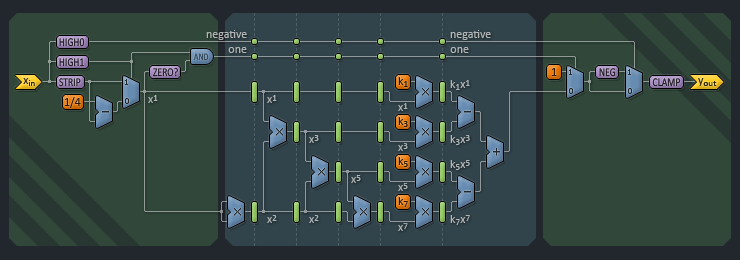
<style>
.page{position:relative;width:740px;height:260px;background:#30473a}
.page>*{position:absolute;margin:0}
.t1{font:12px "Calibri";color:#b2b6b7}
.t2{font:10px "Calibri";scale:0.8 1}
.t3{font:16px "Calibri";color:#332907}
.t4{font:12px "Calibri";color:#332907}
.t5{font:12px "Calibri";scale:0.8 1}
.t6{font:12px/20px "Calibri";color:#2f1903}
.t7{font:16px/20px "Calibri";color:#2f1903}
.t8{font:12px "Calibri";color:#2f1800}
.t9{font:12px "Calibri";color:#1e1823;scale:0.8 1}
.t10{font:12px "Calibri";color:#1c1722;scale:0.8 1}
.t11{font:16px "Calibri";color:#b2b6b7}
.t12{font:12px "Calibri";color:#b2b6b4}
.t13{font:16px "Calibri";color:#b2b6b4}
.t14{font:12px/20px "Calibri";color:#b2b6b7}
.t15{font:16px/20px "Calibri";color:#b2b6b7}
</style>
<div class="page">
<p class="t1" style="left:206px;top:30px;width:41px;height:10px">negative</p>
<p class="t1" style="left:450px;top:30px;width:41px;height:10px">negative</p>
<p class="t2" style="left:193px;top:53px;width:16px;height:8px">AND</p>
<p class="t1" style="left:228px;top:47px;width:19px;height:6px">one</p>
<p class="t1" style="left:450px;top:47px;width:19px;height:6px">one</p>
<p class="t3" style="left:23px;top:78px;width:12px;height:8px"><span class="t4">x</span>in</p>
<p class="t5" style="left:153px;top:67px;width:25px;height:10px">ZERO?</p>
<p class="t6" style="left:398px;top:77px;width:10px;height:130px">k<span class="t7">1<br></span><br>k<span class="t7">3<br></span><br>k<span class="t7">5<br></span><br>k<span class="t7">7</span></p>
<p class="t8" style="left:551px;top:68px;width:6px;height:8px">1</p>
<p class="t9" style="left:599px;top:68px;width:17px;height:9px">NEG</p>
<p class="t10" style="left:652px;top:78px;width:29px;height:9px">CLAMP</p>
<p class="t3" style="left:698px;top:78px;width:19px;height:8px"><span class="t4">y</span>out</p>
<p class="t1" style="left:450px;top:80px;width:20px;height:10px">k<span class="t11">1</span>x<span class="t11">1</span></p>
<p class="t8" style="left:64px;top:97px;width:17px;height:11px">1/4</p>
<p class="t12" style="left:148px;top:95px;width:10px;height:8px">x<span class="t13">1</span></p>
<p class="t1" style="left:267px;top:95px;width:10px;height:8px">x<span class="t11">1</span></p>
<p class="t14" style="left:398px;top:103px;width:10px;height:128px">x<span class="t15">1<br></span><br>x<span class="t15">3<br></span><br>x<span class="t15">5<br></span><br>x<span class="t15">7</span></p>
<p class="t1" style="left:309px;top:135px;width:10px;height:8px">x<span class="t11">3</span></p>
<p class="t1" style="left:450px;top:135px;width:20px;height:10px">k<span class="t11">3</span>x<span class="t11">3</span></p>
<p class="t1" style="left:450px;top:160px;width:20px;height:10px">k<span class="t11">5</span>x<span class="t11">5</span></p>
<p class="t1" style="left:351px;top:175px;width:10px;height:8px">x<span class="t11">5</span></p>
<p class="t1" style="left:267px;top:215px;width:10px;height:8px">x<span class="t11">2</span></p>
<p class="t1" style="left:309px;top:215px;width:10px;height:8px">x<span class="t11">2</span></p>
<p class="t1" style="left:450px;top:215px;width:20px;height:10px">k<span class="t11">7</span>x<span class="t11">7</span></p>
</div>
